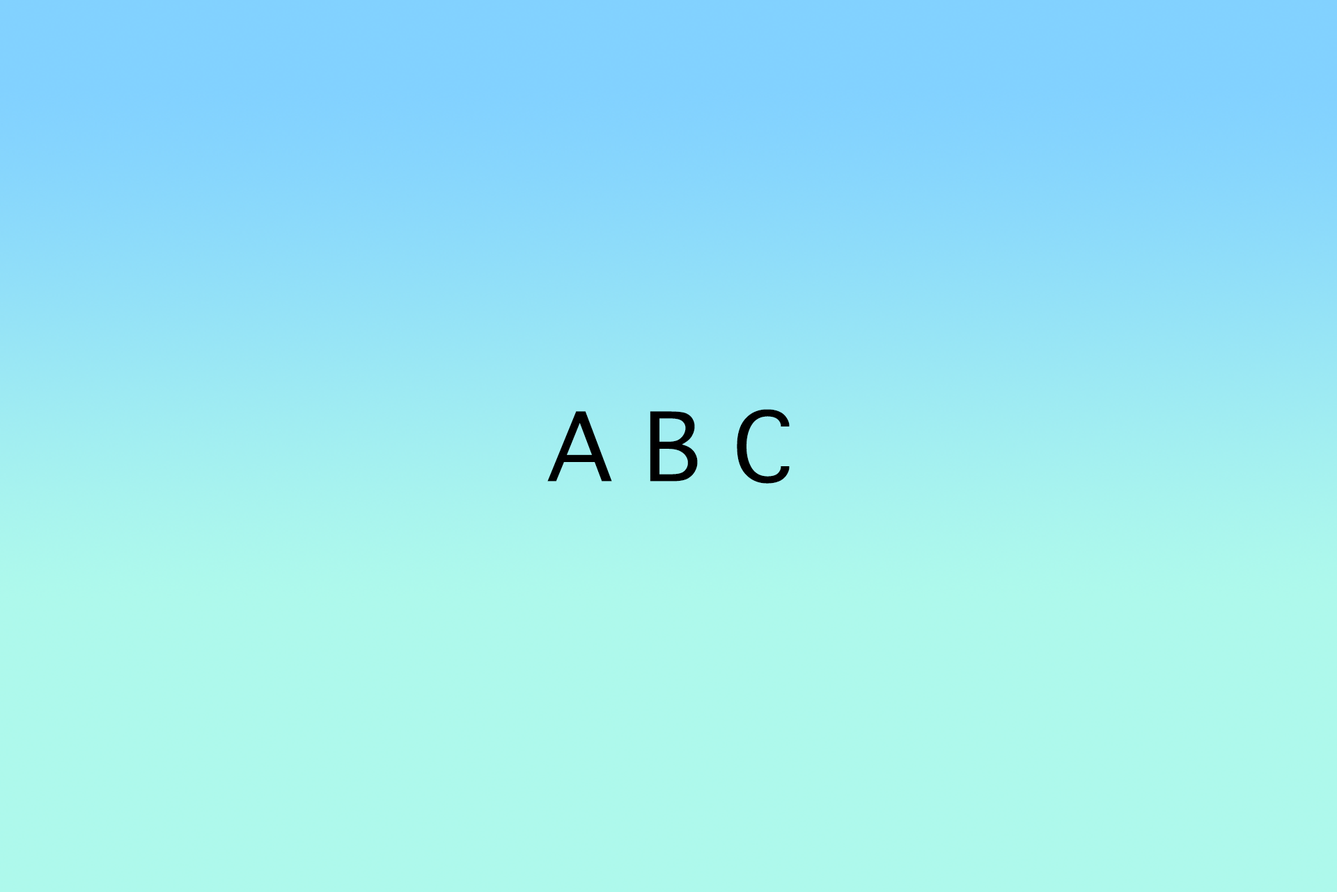
<style>
.page{position:relative;width:1337px;height:892px}
.page>*{position:absolute;margin:0}
.t1{font:91.9px "Geneva";color:#000000}
</style>
<div class="page">
<p class="t1" style="left:547px;top:409px;width:243px;height:74px">A B C</p>
</div>
